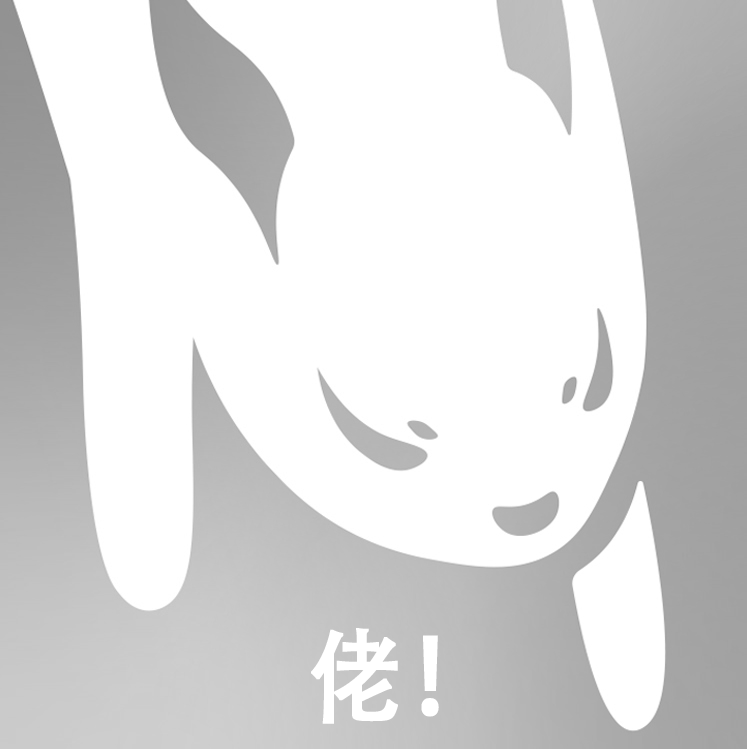
<style>
.page{position:relative;width:747px;height:749px;background:#ffffff}
.page>*{position:absolute;margin:0}
.t1{font:102px "AdobeHeitiStd-Regular";letter-spacing:0.04em;color:#ffffff;font-weight:bold;scale:0.9 1}
</style>
<div class="page">
<p class="t1" style="left:311px;top:628px;width:128px;height:96px">佬！</p>
</div>
